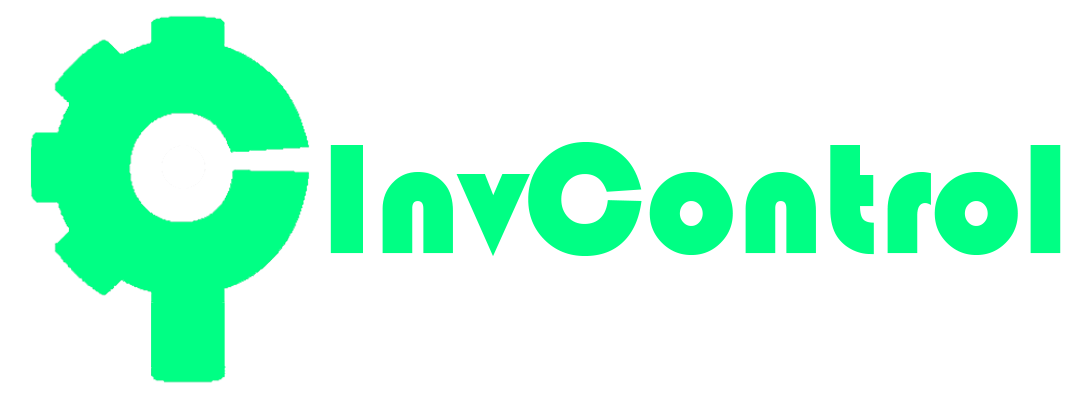
<style>
.page{position:relative;width:1080px;height:400px;background:#ffffff}
.page>*{position:absolute;margin:0}
.t1{font:162.3px "Bauhaus93";color:#00ff84}
</style>
<div class="page">
<p class="t1" style="left:330px;top:142px;width:731px;height:115px">InvControl</p>
</div>
